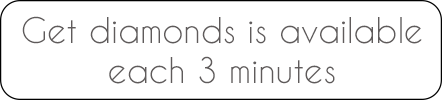
<style>
.page{position:relative;width:442px;height:100px;background:#ffffff}
.page>*{position:absolute;margin:0}
.t1{font:33.3px "CaviarDreams";color:#5f5b5b}
</style>
<div class="page">
<p class="t1" style="left:22px;top:16px;width:400px;height:68px;text-align:center">Get diamonds is available<br>each 3 minutes</p>
</div>
